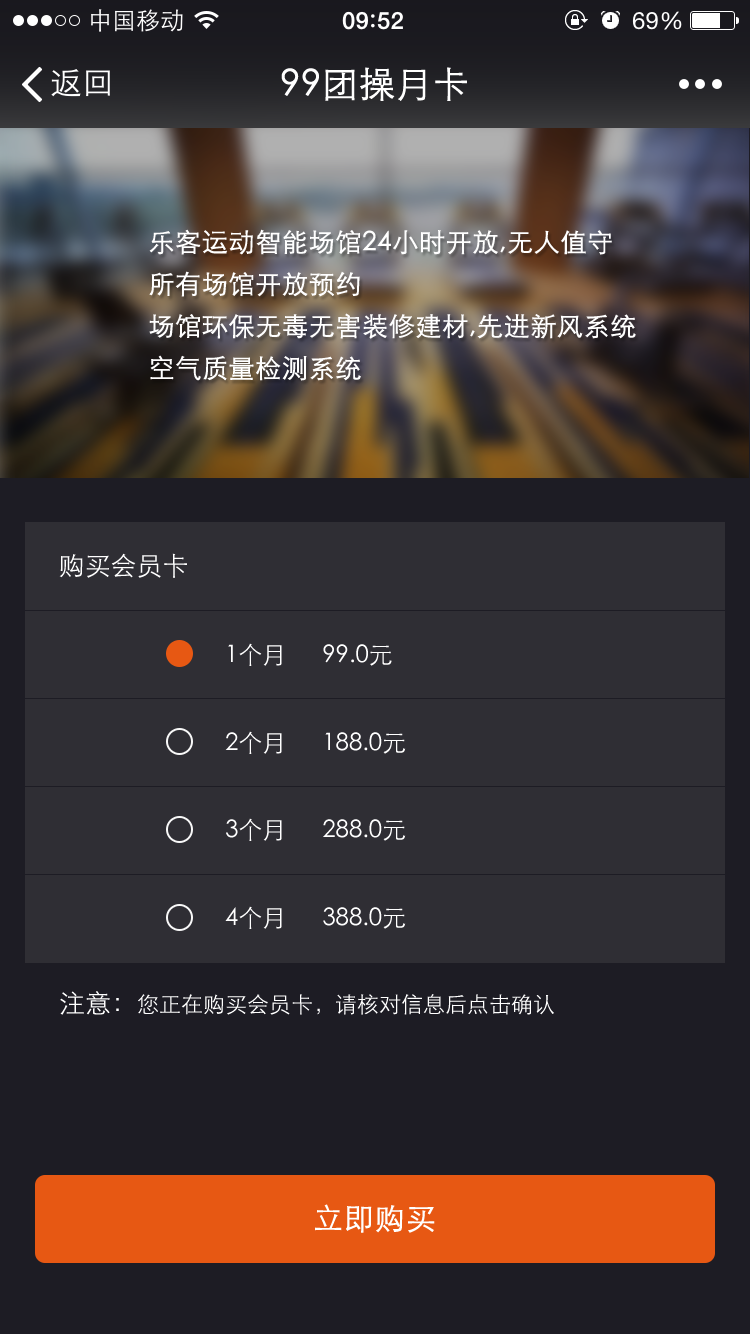
<style>
.page{position:relative;width:750px;height:1334px;background:#2f2e34}
.page>*{position:absolute;margin:0}
.t1{font:36px "STXihei";color:#ffffff;font-weight:bold}
.t2{font:26px/42px "STXihei";color:#ffffff;font-weight:bold}
.t3{font:26px "STXihei";color:#ffffff}
.t4{font:24px "STXihei";color:#ffffff}
.t5{font:22px "STXihei";color:#ffffff}
.t6{font:30px "STXihei";color:#ffffff;font-weight:bold}
</style>
<div class="page">
<p class="t1" style="left:281px;top:67px;width:186px;height:34px">99团操月卡</p>
<p class="t2" style="left:149px;top:229px;width:487px;height:152px">乐客运动智能场馆24小时开放,无人值守<br>所有场馆开放预约<br>场馆环保无毒无害装修建材,先进新风系统<br>空气质量检测系统</p>
<p class="t3" style="left:59px;top:553px;width:128px;height:25px">购买会员卡</p>
<p class="t4" style="left:228px;top:643px;width:164px;height:23px">1个月      99.0元</p>
<p class="t4" style="left:225px;top:731px;width:181px;height:23px">2个月      188.0元</p>
<p class="t4" style="left:226px;top:818px;width:180px;height:23px">3个月      288.0元</p>
<p class="t4" style="left:225px;top:906px;width:181px;height:23px">4个月      388.0元</p>
<p class="t5" style="left:60px;top:991px;width:494px;height:24px"><span class="t3">注意：</span>您正在购买会员卡，请核对信息后点击确认</p>
<p class="t6" style="left:315px;top:1204px;width:120px;height:29px">立即购买</p>
</div>
